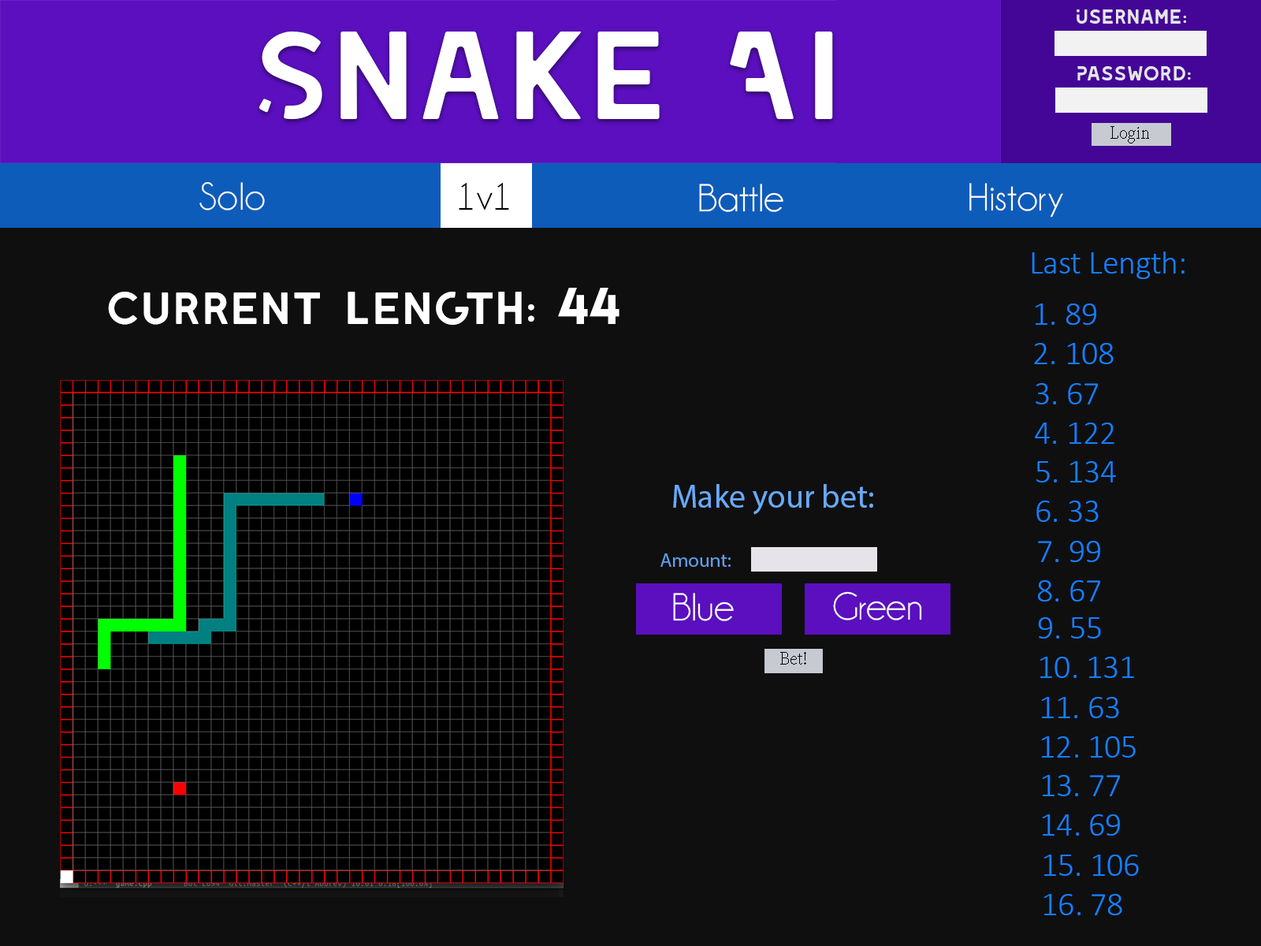
<style>
.page{position:relative;width:1261px;height:946px;background:#0f0f10}
.page>*{position:absolute;margin:0}
.t1{font:19.7px "LEIXO-DEMO";color:#e6e4e9}
.t2{font:124.8px "LEIXO-DEMO";color:#ffffff}
.t3{font:19.7px "AdobeDevanagari-Regular";color:#02030b}
.t4{font:39.4px "Champagne&Limousines";color:#f5fbff}
.t5{font:39.4px "Champagne&Limousines";color:#000000}
.t6{font:39.4px "Champagne&Limousines";color:#ffffff}
.t7{font:32.8px "Calibri-Light";color:#147fff}
.t8{font:46px "LEIXO-DEMO";color:#ffffff}
.t9{font:46px "LemonMilk";color:#ffffff}
.t10{font:32.8px "MyriadPro-Regular";color:#68a9f7}
.t11{font:19.7px "MyriadPro-Regular";color:#619ee6}
</style>
<div class="page">
<p class="t1" style="left:1077px;top:9px;width:109px;height:15px">Username:</p>
<p class="t2" style="left:258px;top:32px;width:575px;height:87px">Snake AI</p>
<p class="t1" style="left:1077px;top:66px;width:114px;height:14px">Password:</p>
<p class="t3" style="left:1110px;top:126px;width:39px;height:17px">Login</p>
<p class="t4" style="left:199px;top:181px;width:66px;height:29px">Solo</p>
<p class="t5" style="left:459px;top:182px;width:50px;height:28px">1v1</p>
<p class="t6" style="left:699px;top:184px;width:84px;height:28px">Battle</p>
<p class="t6" style="left:969px;top:183px;width:94px;height:35px">History</p>
<p class="t7" style="left:1032px;top:251px;width:152px;height:28px">Last Length:</p>
<p class="t8" style="left:108px;top:288px;width:511px;height:37px">Current Length: <span class="t9">44</span></p>
<p class="t7" style="left:1035px;top:303px;width:61px;height:22px">1. 89</p>
<p class="t7" style="left:1034px;top:343px;width:80px;height:21px">2. 108</p>
<p class="t7" style="left:1036px;top:383px;width:62px;height:21px">3. 67</p>
<p class="t7" style="left:1035px;top:422px;width:79px;height:22px">4. 122</p>
<p class="t7" style="left:1036px;top:461px;width:80px;height:21px">5. 134</p>
<p class="t10" style="left:673px;top:484px;width:200px;height:31px">Make your bet:</p>
<p class="t7" style="left:1036px;top:500px;width:63px;height:22px">6. 33</p>
<p class="t7" style="left:1038px;top:541px;width:62px;height:21px">7. 99</p>
<p class="t11" style="left:660px;top:553px;width:71px;height:14px">Amount:</p>
<p class="t7" style="left:1038px;top:580px;width:62px;height:21px">8. 67</p>
<p class="t6" style="left:673px;top:593px;width:61px;height:28px">Blue</p>
<p class="t6" style="left:833px;top:591px;width:89px;height:29px">Green</p>
<p class="t7" style="left:1038px;top:617px;width:63px;height:21px">9. 55</p>
<p class="t3" style="left:780px;top:652px;width:26px;height:12px">Bet!</p>
<p class="t7" style="left:1039px;top:656px;width:95px;height:22px">10. 131</p>
<p class="t7" style="left:1041px;top:697px;width:78px;height:21px">11. 63</p>
<p class="t7" style="left:1041px;top:736px;width:95px;height:21px">12. 105</p>
<p class="t7" style="left:1042px;top:775px;width:78px;height:21px">13. 77</p>
<p class="t7" style="left:1042px;top:814px;width:78px;height:21px">14. 69</p>
<p class="t7" style="left:1043px;top:854px;width:96px;height:22px">15. 106</p>
<p class="t7" style="left:1043px;top:894px;width:79px;height:21px">16. 78</p>
</div>
